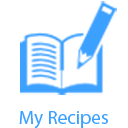
<style>
.page{position:relative;width:128px;height:128px;background:#ffffff}
.page>*{position:absolute;margin:0}
.t1{font:19.2px "MyriadPro-Regular";color:#3ca0ff}
</style>
<div class="page">
<p class="t1" style="left:19px;top:111px;width:89px;height:18px">My Recipes</p>
</div>
